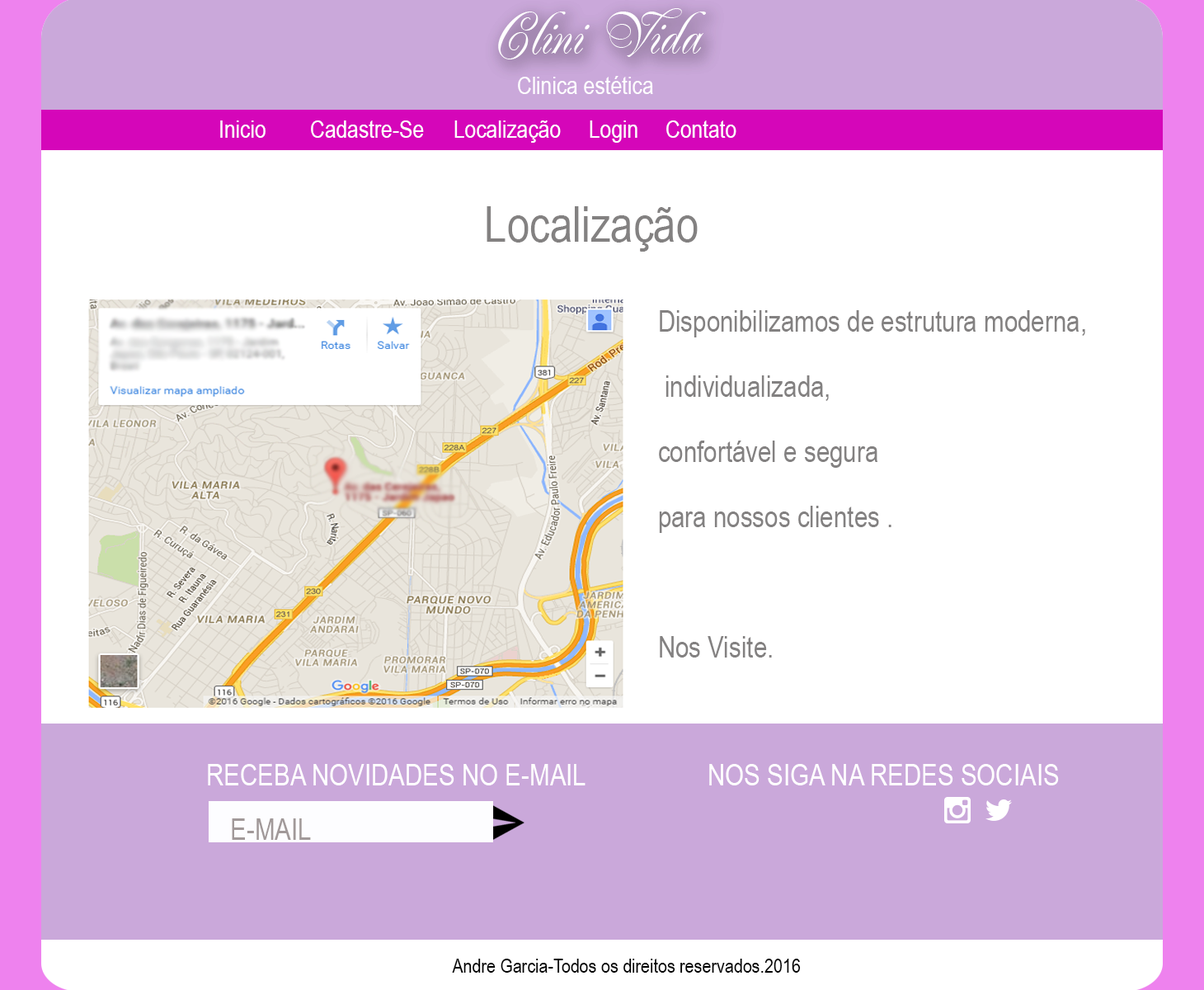
<style>
.page{position:relative;width:1204px;height:990px;background:#ffffff}
.page>*{position:absolute;margin:0}
.t1{font:59.4px "Renaissance-Regular";color:#ffffff}
.t2{font:24.7px "ArialNarrow";color:#ffffff}
.t3{font:49.5px "ArialNarrow";color:#838181}
.t4{font:29.7px/65.2px "ArialNarrow";color:#838181}
.t5{font:29.7px "ArialNarrow";color:#ffffff}
.t6{font:29.7px "ArialNarrow";color:#a19999}
.t7{font:19.8px "ArialNarrow";color:#010101}
</style>
<div class="page">
<p class="t1" style="left:498px;top:8px;width:208px;height:51px">Clini Vida</p>
<p class="t2" style="left:518px;top:76px;width:135px;height:18px">Clinica estética</p>
<p class="t2" style="left:220px;top:120px;width:46px;height:18px">Inicio</p>
<p class="t2" style="left:311px;top:120px;width:113px;height:18px">Cadastre-Se</p>
<p class="t2" style="left:455px;top:120px;width:106px;height:23px">Localização</p>
<p class="t2" style="left:590px;top:120px;width:48px;height:23px">Login</p>
<p class="t2" style="left:667px;top:120px;width:70px;height:18px">Contato</p>
<p class="t3" style="left:487px;top:206px;width:211px;height:46px">Localização</p>
<p class="t4" style="left:659px;top:310px;width:427px;height:348px">Disponibilizamos de estrutura moderna,<br> individualizada, <br>confortável e segura <br>para nossos clientes .<br><br>Nos Visite.</p>
<p class="t5" style="left:208px;top:764px;width:378px;height:21px">RECEBA NOVIDADES NO E-MAIL</p>
<p class="t5" style="left:709px;top:764px;width:350px;height:21px">NOS SIGA NA REDES SOCIAIS</p>
<p class="t6" style="left:232px;top:818px;width:79px;height:22px">E-MAIL</p>
<p class="t7" style="left:452px;top:959px;width:349px;height:14px">Andre Garcia-Todos os direitos reservados.2016</p>
</div>
